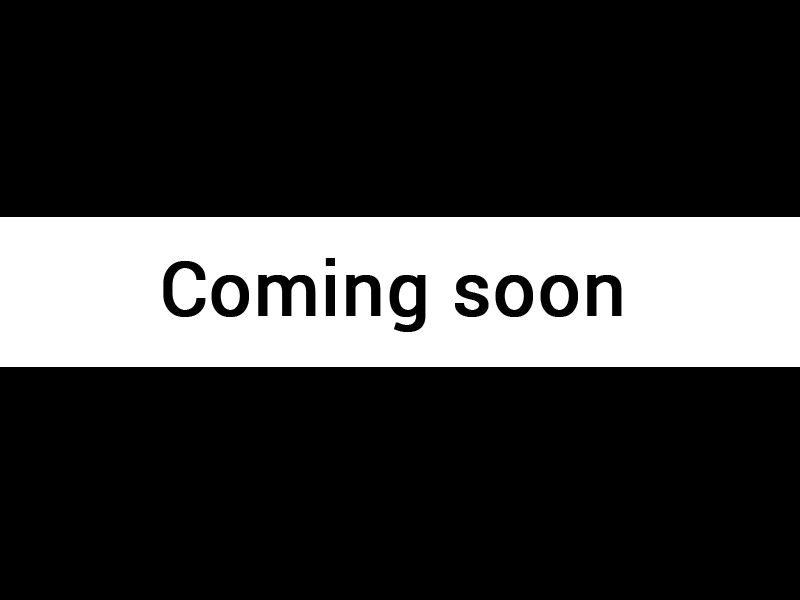
<style>
.page{position:relative;width:800px;height:600px;background:#000000}
.page>*{position:absolute;margin:0}
.t1{font:75px "Roboto-Regular";color:#000000;font-weight:bold}
</style>
<div class="page">
<p class="t1" style="left:163px;top:258px;width:459px;height:74px">Coming soon</p>
</div>
